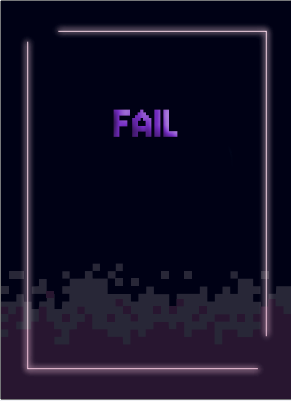
<style>
.page{position:relative;width:291px;height:401px;background:#000115}
.page>*{position:absolute;margin:0}
.t1{font:50px "Jersey10-Regular";letter-spacing:0.025em}
</style>
<div class="page">
<p class="t1" style="left:113px;top:109px;width:65px;height:28px">FAIL</p>
</div>
